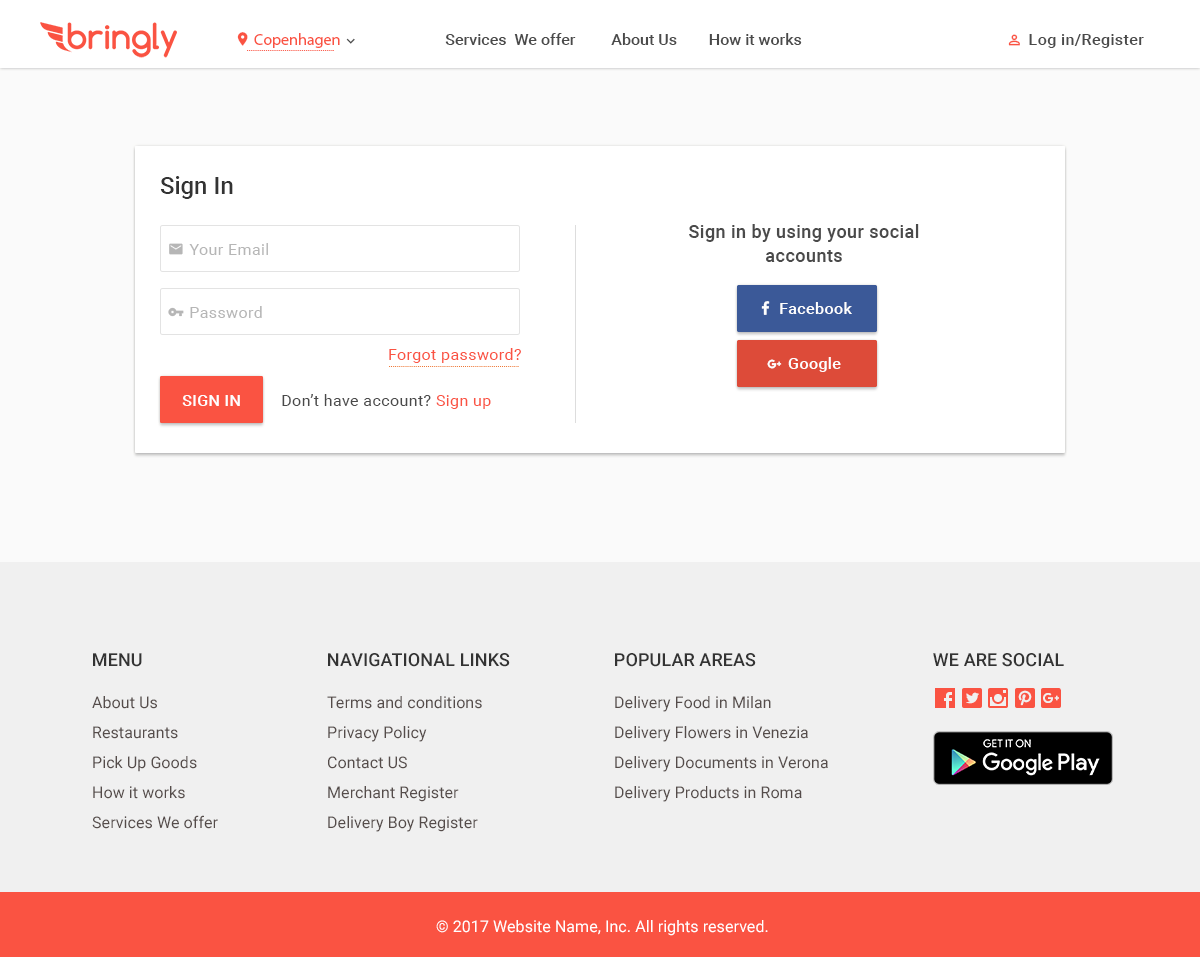
<style>
.page{position:relative;width:1200px;height:957px;background:#f0f0f0}
.page>*{position:absolute;margin:0}
.t1{font:16px "MyriadPro-Regular";color:#fa5342}
.t2{font:16px "Roboto-Medium";color:#4a4a4a}
.t3{font:16px "Roboto-Medium";letter-spacing:0.025em;color:#4a4a4a}
.t4{font:24px "Roboto-Medium";color:#333333}
.t5{font:18px/24px "Roboto-Medium";letter-spacing:0.025em;color:#4a4a4a}
.t6{font:16px "Roboto-Regular";letter-spacing:0.025em;color:#b6b6b6}
.t7{font:16px "Roboto-Medium";letter-spacing:0.025em;color:#fefefe}
.t8{font:16px "Roboto-Regular";letter-spacing:0.025em;color:#fa5342}
.t9{font:16px "Roboto-Medium";letter-spacing:0.025em;color:#fefefe;text-transform:uppercase}
.t10{font:16px "Roboto-Regular";letter-spacing:0.025em;color:#4a4a4a}
.t11{font:18px "Roboto-Medium";letter-spacing:0.005em;color:#333333}
.t12{font:18px "Roboto-Medium";letter-spacing:0.005em;color:#333333;text-transform:uppercase}
.t13{font:16px/30px "Roboto-Regular";letter-spacing:0.005em;color:#554c4a}
.t14{font:16px "Roboto-Regular";letter-spacing:0.005em;color:#ffffff}
</style>
<div class="page">
<p class="t1" style="left:254px;top:33px;width:86px;height:15px">Copenhagen</p>
<p class="t2" style="left:445px;top:33px;width:357px;height:12px">Services  We offer         About Us        How it works</p>
<p class="t3" style="left:1029px;top:34px;width:115px;height:14px">Log in/Register</p>
<p class="t4" style="left:160px;top:176px;width:73px;height:23px">Sign In</p>
<p class="t5" style="left:689px;top:224px;width:230px;height:38px;text-align:center">Sign in by using your social accounts</p>
<p class="t6" style="left:189px;top:243px;width:79px;height:12px">Your Email</p>
<p class="t7" style="left:780px;top:302px;width:72px;height:12px">Facebook</p>
<p class="t6" style="left:190px;top:306px;width:72px;height:12px">Password</p>
<p class="t8" style="left:389px;top:348px;width:132px;height:15px">Forgot password?</p>
<p class="t7" style="left:788px;top:357px;width:53px;height:15px">Google</p>
<p class="t9" style="left:182px;top:395px;width:58px;height:11px">sign IN</p>
<p class="t10" style="left:282px;top:394px;width:209px;height:15px">Don’t have account? <span class="t8">Sign up</span></p>
<p class="t11" style="left:93px;top:653px;width:49px;height:14px">MENU</p>
<p class="t12" style="left:328px;top:653px;width:182px;height:14px">Navigational Links</p>
<p class="t12" style="left:615px;top:653px;width:141px;height:14px">Popular Areas</p>
<p class="t12" style="left:933px;top:653px;width:131px;height:14px">We are social</p>
<p class="t13" style="left:92px;top:696px;width:126px;height:133px">About Us<br>Restaurants<br>Pick Up Goods <br>How it works <br>Services We offer</p>
<p class="t13" style="left:327px;top:696px;width:155px;height:136px">Terms and conditions<br>Privacy Policy<br>Contact US <br>Merchant Register <br>Delivery Boy Register</p>
<p class="t13" style="left:615px;top:696px;width:213px;height:106px">Delivery Food in Milan<br>Delivery Flowers in Venezia<br>Delivery Documents in Verona<br>Delivery Products in Roma</p>
<p class="t14" style="left:436px;top:920px;width:332px;height:16px">© 2017 Website Name, Inc. All rights reserved.</p>
</div>
